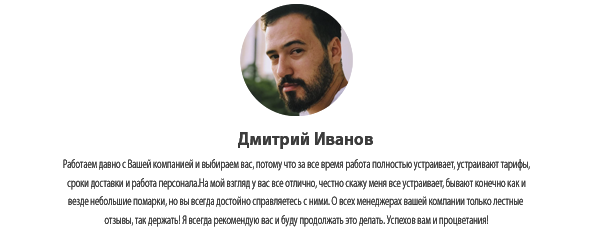
<style>
.page{position:relative;width:601px;height:241px;background:#ffffff}
.page>*{position:absolute;margin:0}
.t1{font:18px "MyriadPro-Bold";color:#3c3c3c;scale:0.95 1}
.t2{font:12.5px/12.5px "MyriadPro-Regular";color:#3c3c3c;scale:0.67 1}
</style>
<div class="page">
<p class="t1" style="left:238px;top:132px;width:135px;height:17px">Дмитрий Иванов</p>
<p class="t2" style="left:63px;top:159px;width:467px;height:68px;text-align:center">Работаем давно с Вашей компанией и выбираем вас, потому что за все время работа полностью устраивает, устраивают тарифы,<br> сроки доставки и работа персонала.На мой взгляд у вас все отлично, честно скажу меня все устраивает, бывают конечно как и <br>везде небольшие помарки, но вы всегда достойно справляетесь с ними. О всех менеджерах вашей компании только лестные <br>отзывы, так держать! Я всегда рекомендую вас и буду продолжать это делать. Успехов вам и процветания!</p>
</div>
